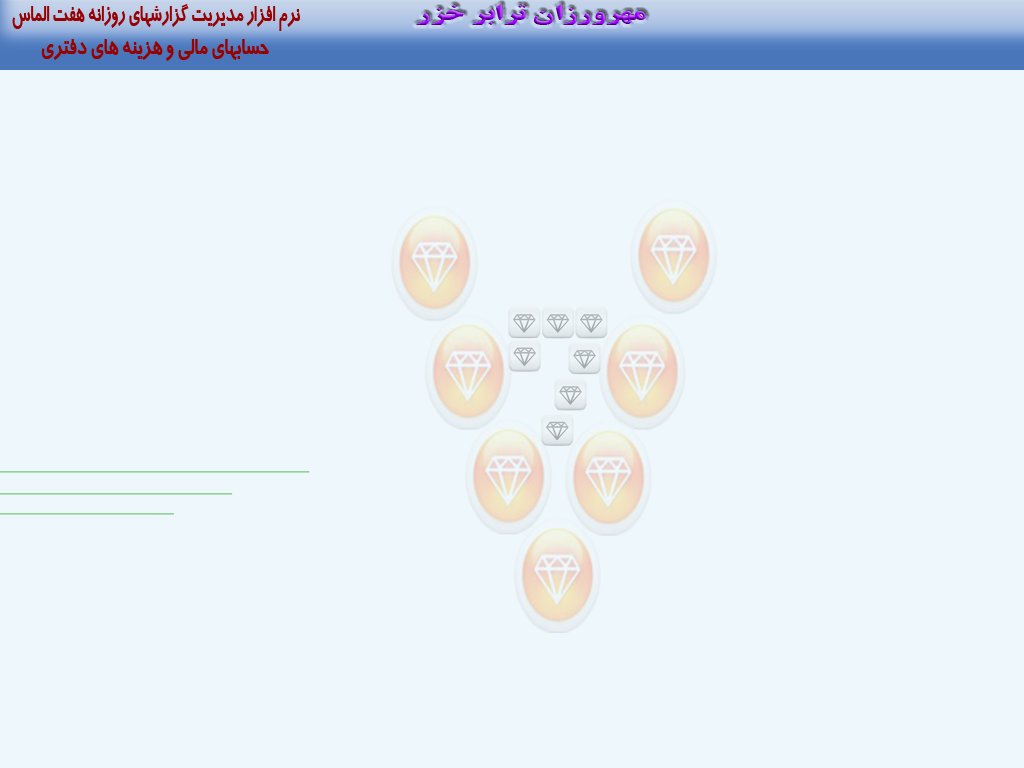
<style>
.page{position:relative;width:1024px;height:768px;background:#edf7fc}
.page>*{position:absolute;margin:0}
.t1{font:24.3px "BTrafficBold";color:#990000;scale:0.63 1}
.t2{font:21.2px "BTitrBold";scale:1.55 1}
.t3{font:24.3px "BTrafficBold";color:#990000;scale:0.72 1}
</style>
<div class="page">
<p class="t1" style="left:12px;top:4px;width:288px;height:27px">نرم افزار مديريت گزارشهاي روزانه هفت الماس</p>
<p class="t2" style="left:416px;top:4px;width:230px;height:21px">مهرورزان ترابر خزر</p>
<p class="t3" style="left:41px;top:39px;width:228px;height:22px">حسابهاي مالي و هزينه هاي دفتري</p>
</div>
